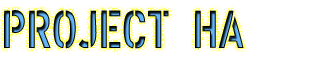
<style>
.page{position:relative;width:320px;height:60px;background:#ffffff}
.page>*{position:absolute;margin:0}
.t1{font:52.7px "XXIISTRAIGHT-ARMY"}
</style>
<div class="page">
<p class="t1" style="left:4px;top:10px;width:240px;height:39px">PROJECT HA</p>
</div>
